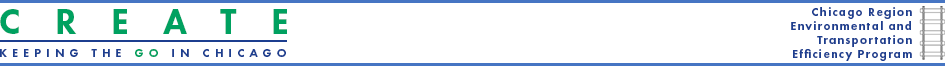
<style>
.page{position:relative;width:945px;height:66px;background:#ffffff}
.page>*{position:absolute;margin:0}
.t1{font:36px "FuturaPT-Heavy";letter-spacing:0.95em;color:#00a160}
.t2{font:12px/14px "FuturaPT-Heavy";letter-spacing:0.1em;color:#1c3e8f}
.t3{font:12px "FuturaPT-Heavy";letter-spacing:0.42em;color:#1c3e8f}
.t4{font:12px "FuturaPT-Heavy";letter-spacing:0.42em;color:#00a160}
</style>
<div class="page">
<p class="t1" style="left:0px;top:9px;width:287px;height:25px">CREATE</p>
<p class="t2" style="left:791px;top:7px;width:121px;height:54px;text-align:right">Chicago Region Environmental and<br>Transportation Efficiency Program</p>
<p class="t3" style="left:0px;top:49px;width:286px;height:8px">KEEPING THE<span class="t4"> GO </span>IN CHICAGO</p>
</div>
